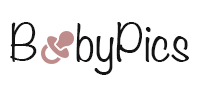
<style>
.page{position:relative;width:200px;height:97px;background:#ffffff}
.page>*{position:absolute;margin:0}
.t1{font:46.1px "Noteworthy-Light";color:#141414}
</style>
<div class="page">
<p class="t1" style="left:10px;top:22px;width:179px;height:53px">B   byPics</p>
</div>
